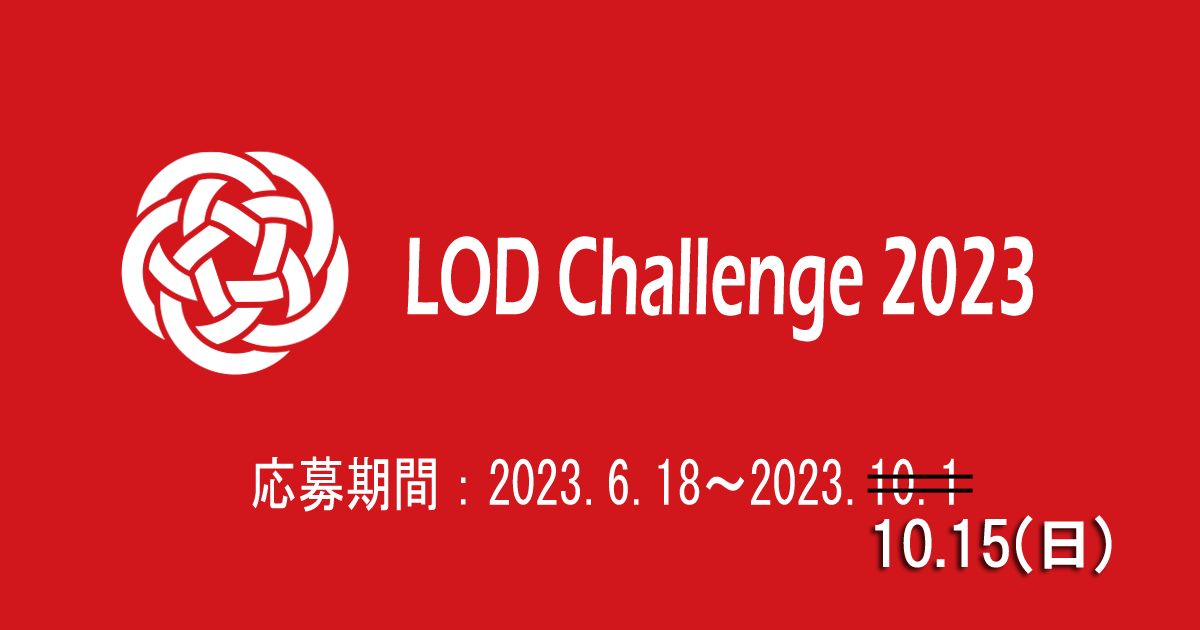
<style>
.page{position:relative;width:1200px;height:630px;background:#d1171c}
.page>*{position:absolute;margin:0}
.t1{font:114.8px "ErasITC-Demi";color:#ffffff;scale:0.56 1}
.t2{font:60px "MS-Gothic";color:#ffffff;scale:0.79 1}
.t3{font:60px "HGPGothicE";color:#ffffff}
</style>
<div class="page">
<p class="t1" style="left:407px;top:236px;width:626px;height:106px">LOD Challenge 2023</p>
<p class="t2" style="left:252px;top:456px;width:702px;height:56px">応募期間：2023.6.18～2023.10.1</p>
<p class="t3" style="left:875px;top:515px;width:237px;height:59px">10.15(日)</p>
</div>
